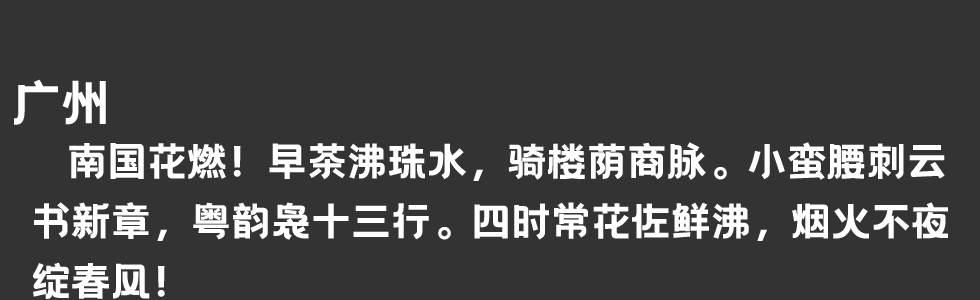
<style>
.page{position:relative;width:980px;height:300px;background:#333333}
.page>*{position:absolute;margin:0}
.t1{font:50px "HelloFont-WenYiHei";color:#ffffff}
.t2{font:40px/60px "HelloFont-WenYiHei";color:#ffffff}
</style>
<div class="page">
<p class="t1" style="left:14px;top:79px;width:92px;height:46px">广州</p>
<p class="t2" style="left:33px;top:142px;width:915px;height:157px">南国花燃！早茶沸珠水，骑楼荫商脉。小蛮腰刺云<br>书新章，粤韵袅十三行。四时常花佐鲜沸，烟火不夜<br>绽春风！</p>
</div>
